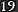
<style>
.page{position:relative;width:18px;height:12px;background:#333333}
.page>*{position:absolute;margin:0}
.t1{font:17px "Perpetua-Bold";color:#ffffff}
</style>
<div class="page">
<p class="t1" style="left:1px;top:1px;width:14px;height:10px">19</p>
</div>
